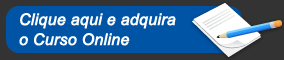
<style>
.page{position:relative;width:284px;height:60px;background:#0054a6}
.page>*{position:absolute;margin:0}
.t1{font:16px/20px "Arial-ItalicMT";letter-spacing:-0.01em;color:#ffffff;font-weight:bold}
</style>
<div class="page">
<p class="t1" style="left:19px;top:13px;width:157px;height:33px">Clique aqui e adquira<br>o Curso Online</p>
</div>
